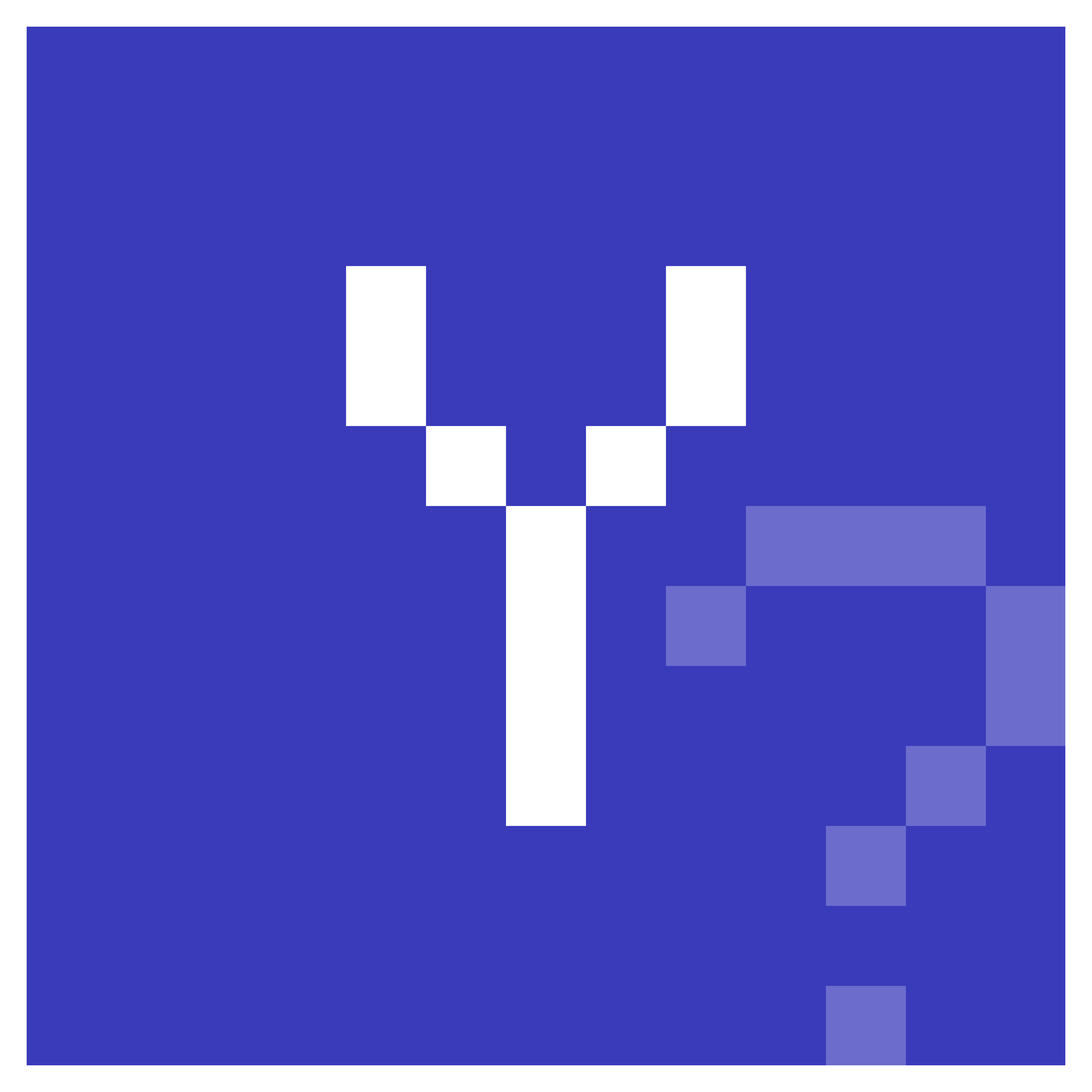
<style>
.page{position:relative;width:1092px;height:1092px;background:#393bbb}
.page>*{position:absolute;margin:0}
.t1{font:799.8px "Yapix";color:#ffffff}
.t2{font:799.8px "Yapix";color:#6b6ccc}
</style>
<div class="page">
<p class="t1" style="left:346px;top:266px;width:400px;height:560px">Y</p>
<p class="t2" style="left:666px;top:506px;width:400px;height:560px">?</p>
</div>
